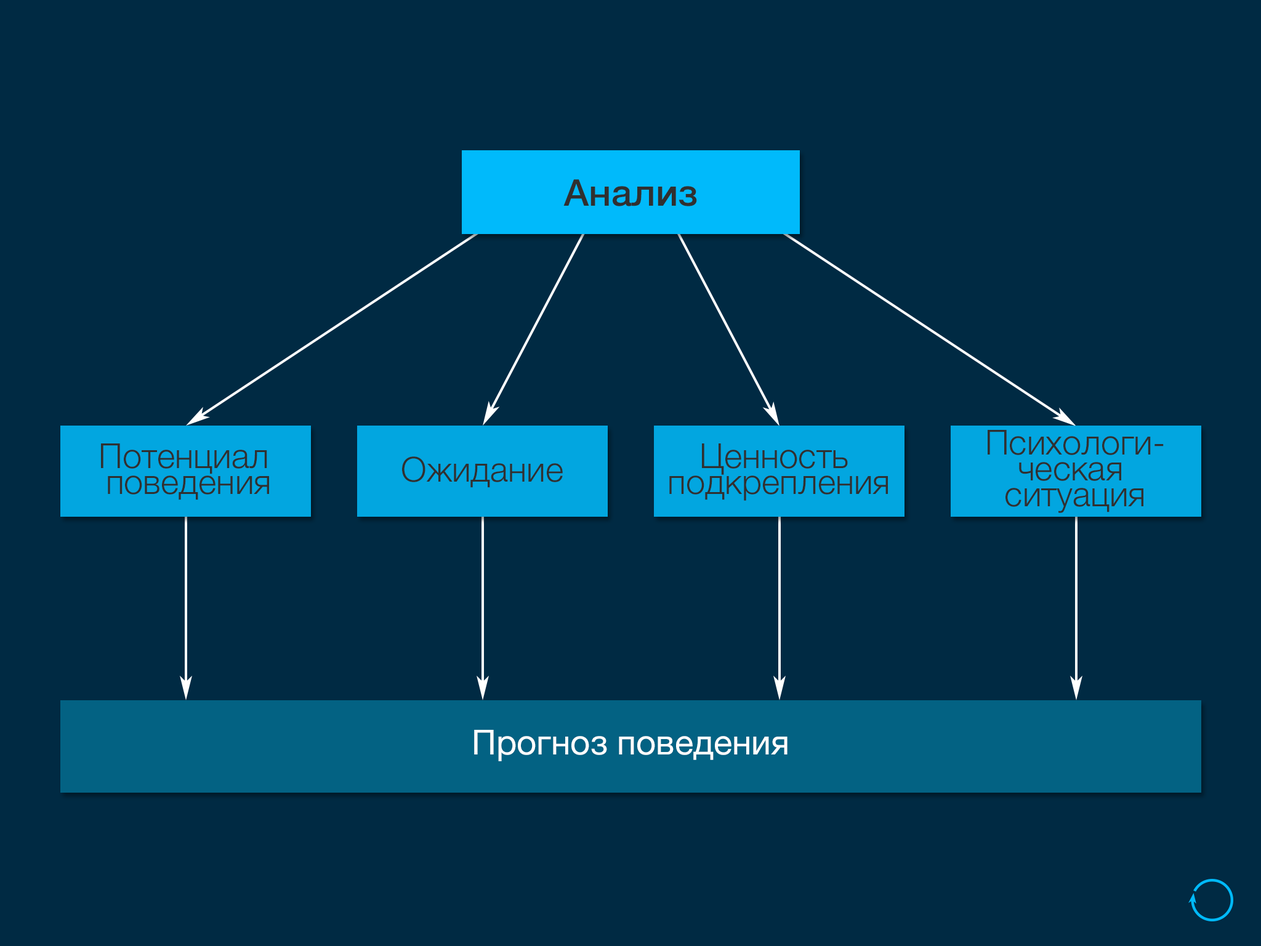
<style>
.page{position:relative;width:1261px;height:946px;background:#002a43}
.page>*{position:absolute;margin:0}
.t1{font:36.9px "HelveticaNeue-Medium";color:#303030}
.t2{font:34.5px/25.9px "HelveticaNeue-Light";color:#303030}
.t3{font:34.5px "HelveticaNeue-Light";color:#303030}
.t4{font:34.5px "HelveticaNeue";color:#ffffff}
</style>
<div class="page">
<p class="t1" style="left:563px;top:179px;width:134px;height:27px">Анализ</p>
<p class="t2" style="left:988px;top:430px;width:176px;height:83px;text-align:center">Психологи-<br>ческая <br>ситуация</p>
<p class="t2" style="left:101px;top:443px;width:168px;height:57px;text-align:center">Потенциал <br>поведения</p>
<p class="t2" style="left:669px;top:443px;width:219px;height:58px;text-align:center">Ценность <br>подкрепления</p>
<p class="t3" style="left:402px;top:456px;width:161px;height:32px">Ожидание</p>
<p class="t4" style="left:474px;top:730px;width:313px;height:31px">Прогноз поведения</p>
</div>
